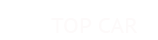
<style>
.page{position:relative;width:158px;height:40px;background:#ffffff}
.page>*{position:absolute;margin:0}
.t1{font:21.2px "PTSans-Caption";color:#fdfafa}
</style>
<div class="page">
<p class="t1" style="left:51px;top:18px;width:87px;height:15px">TOP CAR</p>
</div>
